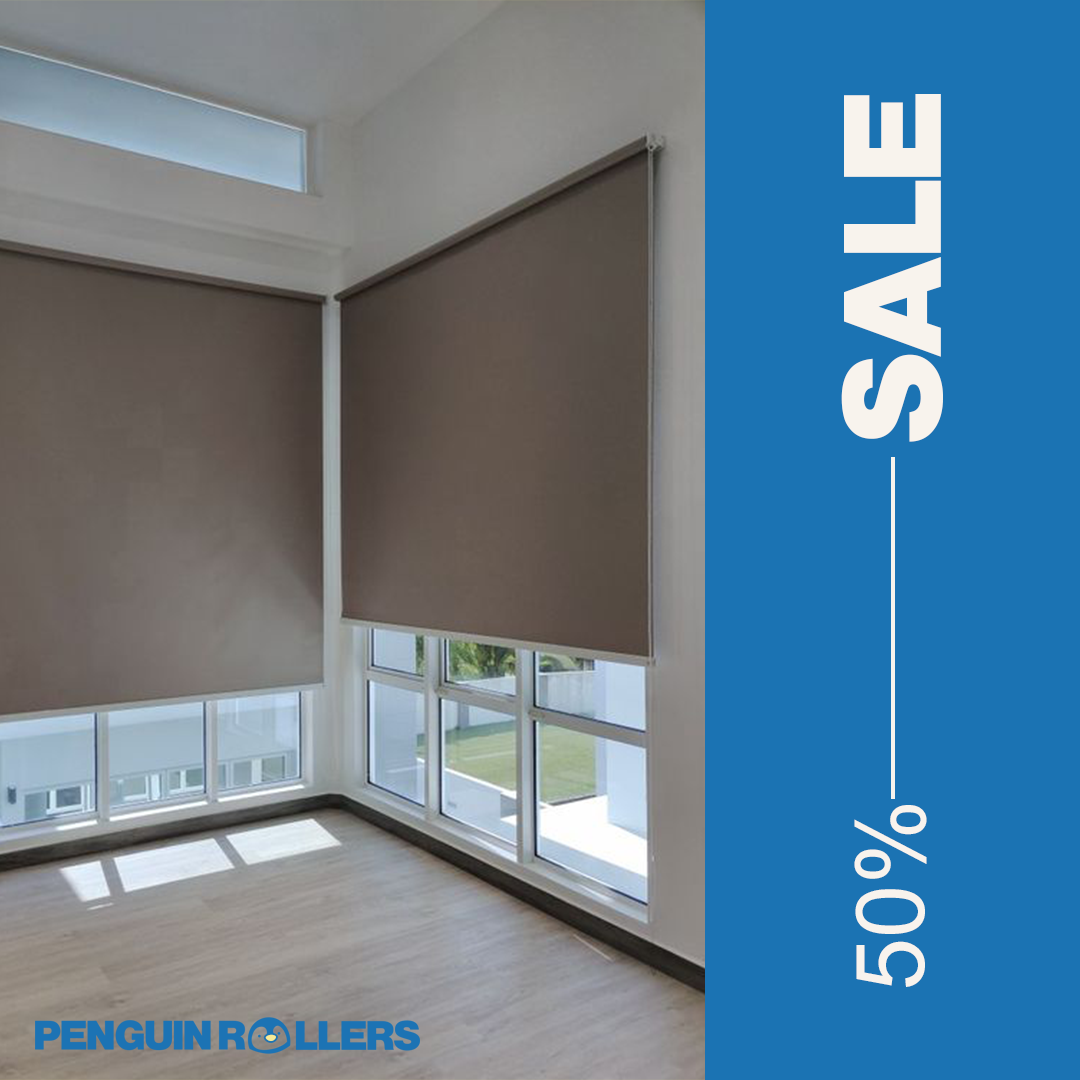
<style>
.page{position:relative;width:1080px;height:1080px;background:#1b73b3}
.page>*{position:absolute;margin:0}
.t1{font:145.3px "NimbusSansBeckerPBla";color:#f8f3ed}
.t2{font:95.8px "ArialMT";color:#f8f3ed}
</style>
<div class="page">
<p class="t1" style="left:841px;top:94px;width:102px;height:348px;rotate:-90deg">SALE</p>
<p class="t2" style="left:854px;top:805px;width:73px;height:182px;rotate:-90deg">50%</p>
</div>
